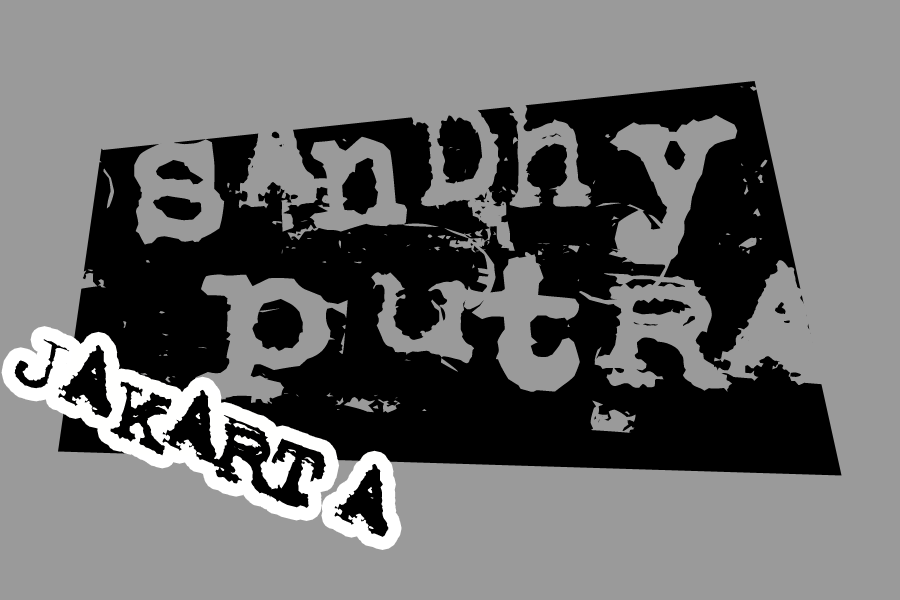
<style>
.page{position:relative;width:900px;height:600px;background:#9a9a9a}
.page>*{position:absolute;margin:0}
.t1{font:138.7px "Metalic-Avacodo";color:#9a9a9a;scale:0.96 1}
.t2{font:154.1px "Uncletypewriter";color:#9a9a9a;scale:0.96 1}
.t3{font:138.7px "Uncletypewriter";color:#9a9a9a;scale:0.96 1}
.t4{font:138.7px "Metalic-Avacodo";color:#9a9a9a;scale:1.36 1}
.t5{font:138.7px "Uncletypewriter";color:#9a9a9a;scale:1.36 1}
.t6{font:74.5px "Metalic-Avacodo";color:#000000;scale:1.25 1}
</style>
<div class="page">
<p class="t1" style="left:40px;top:69px;width:728px;height:236px;rotate:-4deg"><span class="t2">s</span>A<span class="t3">n</span>Dh<span class="t3">y</span></p>
<p class="t4" style="left:113px;top:221px;width:718px;height:212px;rotate:5deg"><span class="t5">p</span>u<span class="t5">t</span>RA</p>
<p class="t6" style="left:14px;top:339px;width:375px;height:198px;rotate:23deg">JAKARTA</p>
</div>
